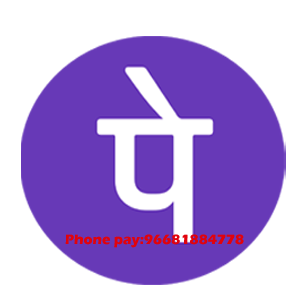
<style>
.page{position:relative;width:300px;height:300px;background:#ffffff}
.page>*{position:absolute;margin:0}
.t1{font:14px "ErasITC-Bold";color:#e1030d}
</style>
<div class="page">
<p class="t1" style="left:65px;top:234px;width:179px;height:14px">Phone pay:96681884778</p>
</div>
